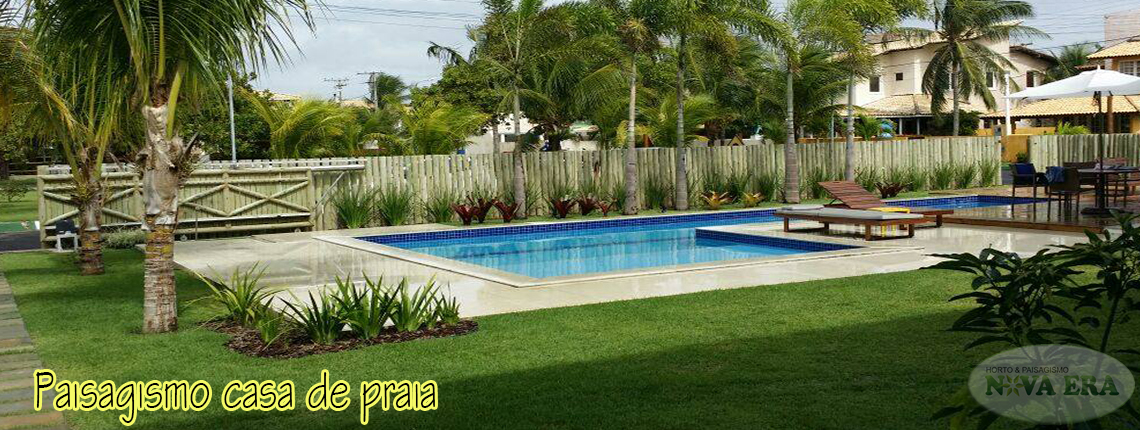
<style>
.page{position:relative;width:1140px;height:430px}
.page>*{position:absolute;margin:0}
.t1{font:55.3px "StylusBT";color:#000000;scale:0.67 1}
</style>
<div class="page">
<p class="t1" style="left:36px;top:372px;width:399px;height:51px">Paisagismo casa de praia</p>
</div>
